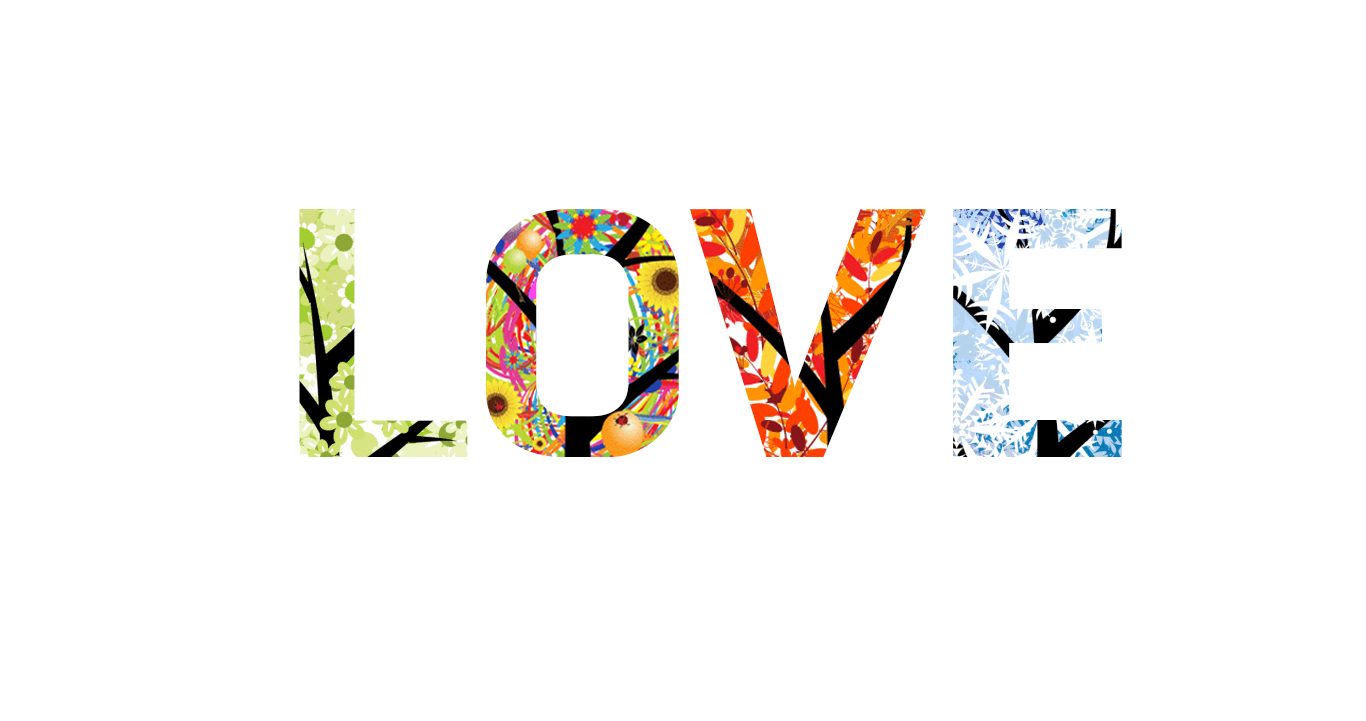
<style>
.page{position:relative;width:1366px;height:721px;background:#ffffff}
.page>*{position:absolute;margin:0}
.t1{font:339.5px "BMHANNA11yrsold"}
</style>
<div class="page">
<p class="t1" style="left:299px;top:209px;width:823px;height:248px">LOVE</p>
</div>
